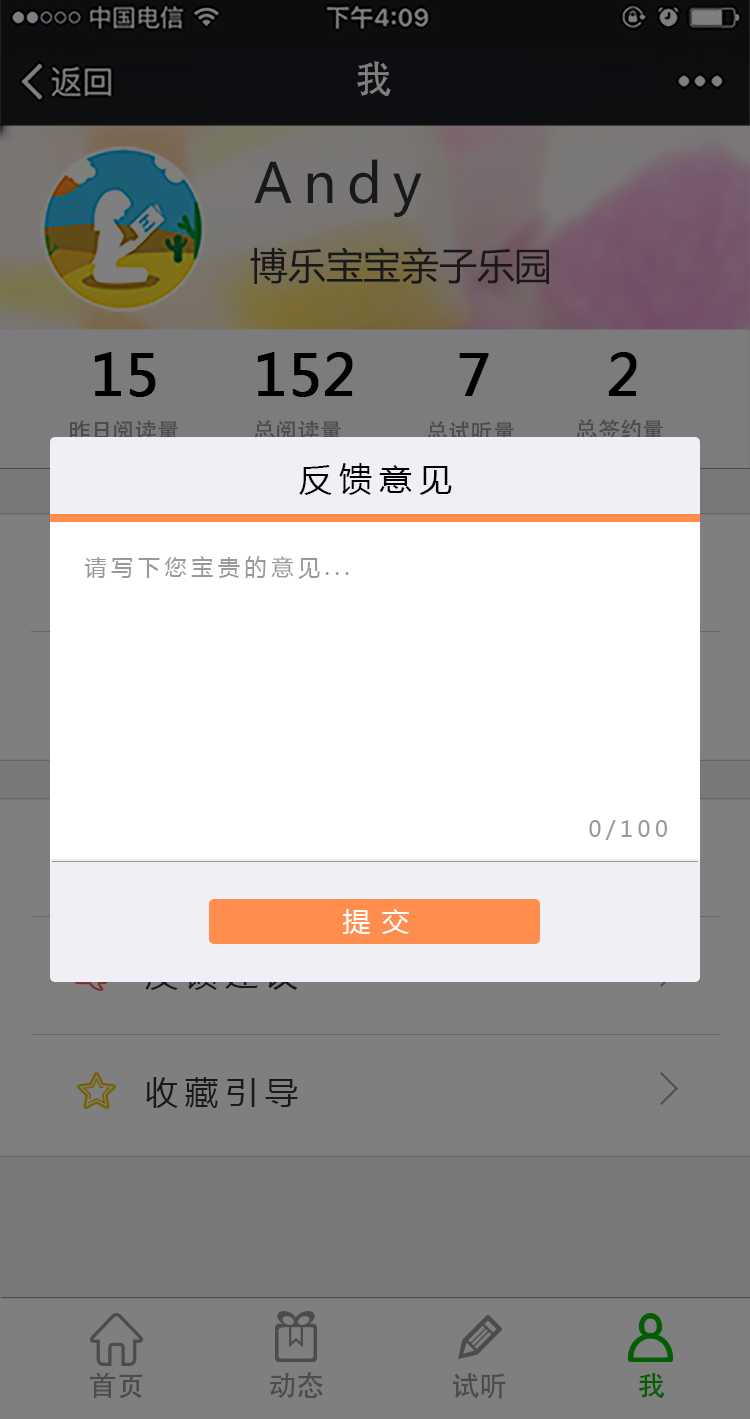
<style>
.page{position:relative;width:750px;height:1419px;background:#7f7f7f}
.page>*{position:absolute;margin:0}
.t1{font:37.8px "AdobeHeitiStd-Regular";color:#7f7f7f}
.t2{font:54.4px "MicrosoftYaHei";letter-spacing:0.2em;color:#191919}
.t3{font:37.8px "MicrosoftYaHei";color:#191919}
.t4{font:55.6px "MicrosoftYaHei";color:#000000;font-weight:bold}
.t5{font:22.2px "AdobeHeitiStd-Regular";color:#4c4c4c}
.t6{font:33.3px "MicrosoftYaHei";letter-spacing:0.2em;color:#000000}
.t7{font:22.2px "MicrosoftYaHei";letter-spacing:0.2em;color:#999999}
.t8{font:27.8px "MicrosoftYaHei";letter-spacing:0.4em;color:#ffffff}
.t9{font:33.3px "MicrosoftYaHei";letter-spacing:0.2em;color:#191919}
.t10{font:27.8px "AdobeHeitiStd-Regular";color:#4c4c4c}
.t11{font:27.8px "AdobeHeitiStd-Regular";color:#045d03}
</style>
<div class="page">
<p class="t1" style="left:357px;top:61px;width:34px;height:35px">我</p>
<p class="t2" style="left:254px;top:159px;width:168px;height:58px">Andy</p>
<p class="t3" style="left:250px;top:247px;width:299px;height:37px">博乐宝宝亲子乐园</p>
<p class="t4" style="left:94px;top:352px;width:62px;height:45px">15</p>
<p class="t4" style="left:257px;top:352px;width:96px;height:45px">152</p>
<p class="t4" style="left:459px;top:353px;width:30px;height:43px">7</p>
<p class="t4" style="left:608px;top:352px;width:29px;height:44px">2</p>
<p class="t5" style="left:69px;top:420px;width:109px;height:21px">昨日阅读量</p>
<p class="t6" style="left:299px;top:463px;width:153px;height:32px">反馈意见</p>
<p class="t7" style="left:84px;top:556px;width:265px;height:23px">请写下您宝贵的意见...</p>
<p class="t7" style="left:589px;top:820px;width:78px;height:20px">0/100</p>
<p class="t8" style="left:342px;top:909px;width:67px;height:25px">提交</p>
<p class="t9" style="left:146px;top:1077px;width:152px;height:31px">收藏引导</p>
<p class="t10" style="left:89px;top:1372px;width:54px;height:27px">首页</p>
<p class="t10" style="left:270px;top:1372px;width:53px;height:27px">动态</p>
<p class="t10" style="left:452px;top:1373px;width:54px;height:26px">试听</p>
<p class="t11" style="left:639px;top:1372px;width:26px;height:26px">我</p>
</div>
